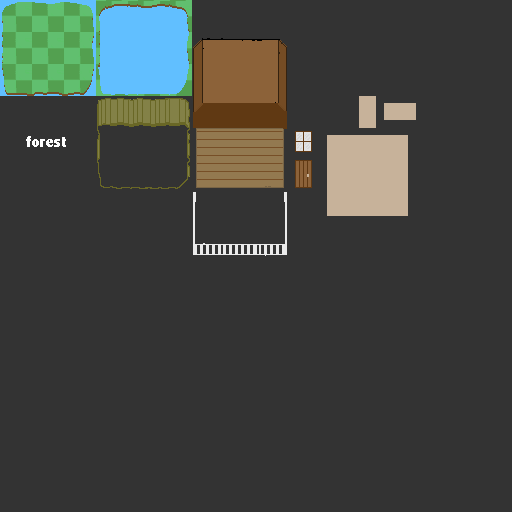
<style>
.page{position:relative;width:512px;height:512px;background:#333333}
.page>*{position:absolute;margin:0}
.t1{font:16px "AbadiMT-CondensedExtraBold";letter-spacing:0.025em;color:#ffffff}
</style>
<div class="page">
<p class="t1" style="left:26px;top:136px;width:40px;height:11px">forest</p>
</div>
